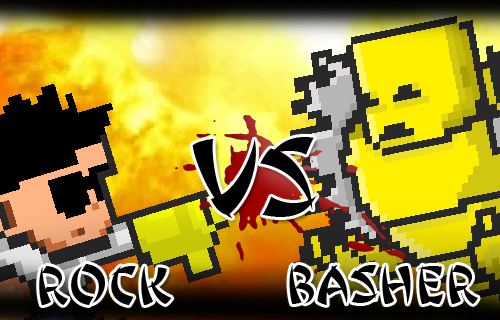
<style>
.page{position:relative;width:500px;height:320px}
.page>*{position:absolute;margin:0}
.t1{font:100px "Splitsplatsplodge"}
.t2{font:100px "JingJing";color:#000000}
.t3{font:48px "JingJing";color:#000000}
</style>
<div class="page">
<p class="t1" style="left:174px;top:115px;width:232px;height:160px">f</p>
<p class="t2" style="left:192px;top:137px;width:125px;height:81px">vs</p>
<p class="t3" style="left:39px;top:264px;width:133px;height:41px">ROck</p>
<p class="t3" style="left:289px;top:265px;width:189px;height:40px">Basher</p>
</div>
